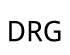
<style>
.page{position:relative;width:70px;height:55px;background:#ffffff}
.page>*{position:absolute;margin:0}
.t1{font:28.6px "DroidSans";color:#000000}
</style>
<div class="page">
<p class="t1" style="left:9px;top:20px;width:52px;height:22px">DRG</p>
</div>
